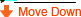
<style>
.page{position:relative;width:81px;height:17px;background:#ffffff}
.page>*{position:absolute;margin:0}
.t1{font:12px "ArialMT"}
</style>
<div class="page">
<p class="t1" style="left:19px;top:4px;width:62px;height:9px">Move Down</p>
</div>
